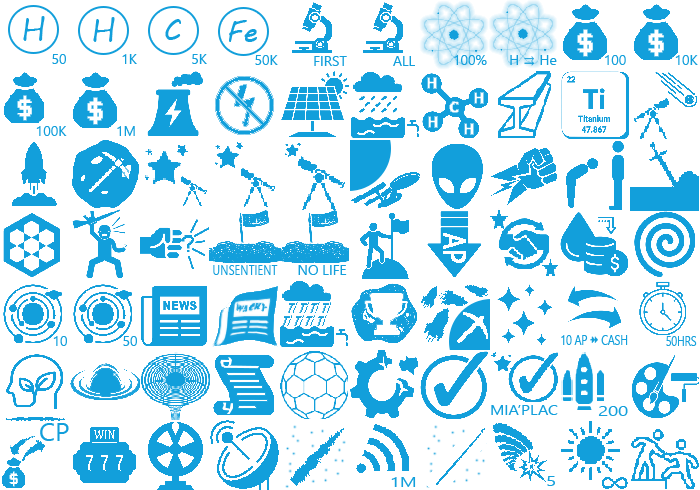
<style>
.page{position:relative;width:700px;height:490px;background:#ffffff}
.page>*{position:absolute;margin:0}
.t1{font:30px "MVBoli";color:#129fdb}
.t2{font:14px "SegoeUISymbol";color:#129fdb}
.t3{font:14px "SegoeUISymbol";color:#129fdb;scale:0.8 1}
.t4{font:14px "SegoeUISymbol";color:#129fdb;scale:0.75 1}
.t5{font:14px "SegoeUISymbol";color:#129fdb;scale:1.14 1}
.t6{font:14px "SegoeUISymbol";color:#129fdb;scale:1.32 1}
.t7{font:25px "SegoeUISymbol";color:#129fdb;scale:1.03 1}
</style>
<div class="page">
<p class="t1" style="left:165px;top:19px;width:16px;height:21px">C</p>
<p class="t1" style="left:229px;top:20px;width:28px;height:22px">Fe</p>
<p class="t2" style="left:52px;top:54px;width:14px;height:10px">50</p>
<p class="t2" style="left:122px;top:54px;width:15px;height:10px">1K</p>
<p class="t2" style="left:192px;top:54px;width:15px;height:10px">5K</p>
<p class="t2" style="left:255px;top:55px;width:23px;height:10px">50K</p>
<p class="t2" style="left:314px;top:56px;width:33px;height:10px">FIRST</p>
<p class="t2" style="left:393px;top:56px;width:22px;height:10px">ALL</p>
<p class="t2" style="left:454px;top:55px;width:33px;height:10px">100%</p>
<p class="t2" style="left:510px;top:55px;width:47px;height:11px">H ⇉ He</p>
<p class="t2" style="left:605px;top:55px;width:21px;height:10px">100</p>
<p class="t2" style="left:675px;top:55px;width:23px;height:10px">10K</p>
<p class="t2" style="left:36px;top:126px;width:31px;height:10px">100K</p>
<p class="t2" style="left:117px;top:126px;width:18px;height:10px">1M</p>
<p class="t3" style="left:213px;top:265px;width:65px;height:10px">UNSENTIENT</p>
<p class="t2" style="left:298px;top:265px;width:49px;height:10px">NO LIFE</p>
<p class="t2" style="left:53px;top:336px;width:14px;height:10px">10</p>
<p class="t2" style="left:123px;top:336px;width:14px;height:10px">50</p>
<p class="t4" style="left:561px;top:335px;width:67px;height:10px">10 AP ⯮ CASH</p>
<p class="t4" style="left:666px;top:336px;width:31px;height:10px">50HRS</p>
<p class="t5" style="left:491px;top:405px;width:67px;height:10px">MIA’PLAC</p>
<p class="t6" style="left:598px;top:406px;width:30px;height:10px">200</p>
<p class="t7" style="left:40px;top:423px;width:29px;height:18px">CP</p>
<p class="t6" style="left:391px;top:477px;width:25px;height:10px">1M</p>
<p class="t6" style="left:547px;top:476px;width:8px;height:10px">5</p>
</div>
